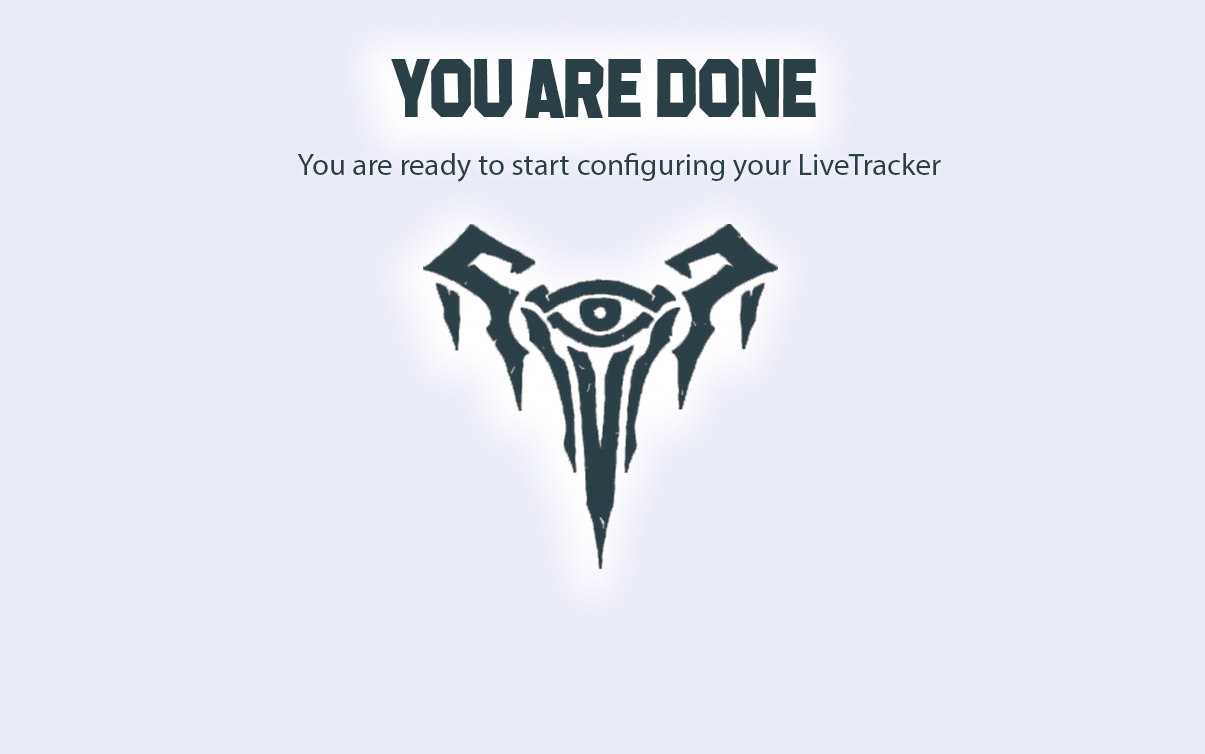
<style>
.page{position:relative;width:1205px;height:754px;background:#e8eaf6}
.page>*{position:absolute;margin:0}
.t1{font:82.1px "MachineGunk";color:#2b3f47}
.t2{font:30.9px "MyriadPro-Regular";color:#2b3f47}
</style>
<div class="page">
<p class="t1" style="left:391px;top:59px;width:425px;height:59px">you are done</p>
<p class="t2" style="left:297px;top:153px;width:644px;height:29px">You are ready to start configuring your LiveTracker</p>
</div>
